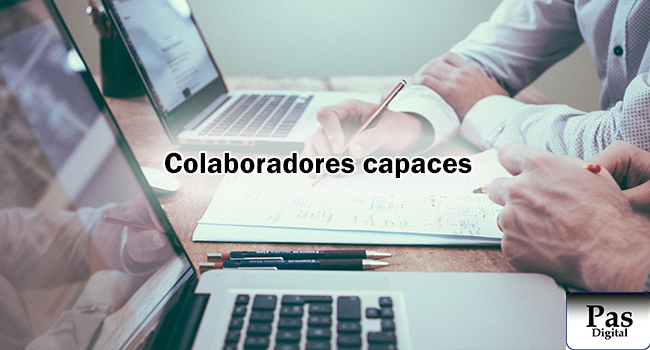
<style>
.page{position:relative;width:650px;height:350px}
.page>*{position:absolute;margin:0}
.t1{font:30px "FranklinGothic-Demi";color:#000000}
</style>
<div class="page">
<p class="t1" style="left:165px;top:152px;width:307px;height:26px">Colaboradores capaces</p>
</div>
